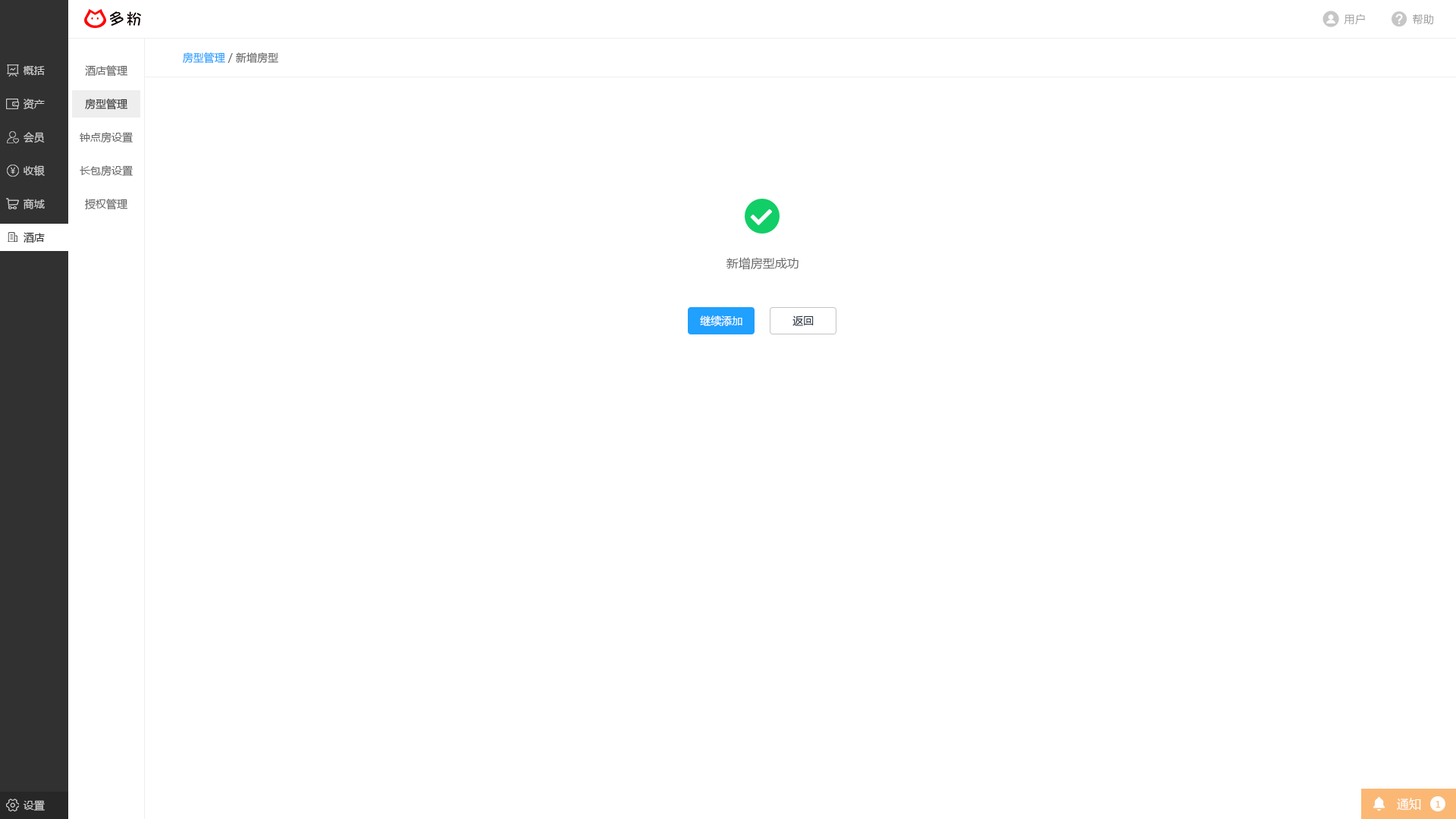
<style>
.page{position:relative;width:1456px;height:819px;background:#ffffff}
.page>*{position:absolute;margin:0}
.t1{font:10.6px "MicrosoftYaHei";letter-spacing:0.025em;color:#999999}
.t2{font:10.6px "MicrosoftYaHei";color:#666666}
.t3{font:10.6px "MicrosoftYaHei";color:#20a0ff}
.t4{font:10.6px "MicrosoftYaHei";color:#cccccc}
.t5{font:10.6px "MicrosoftYaHei";color:#333333}
.t6{font:10.6px "MicrosoftYaHei";color:#313131}
.t7{font:12.1px "MicrosoftYaHei";color:#666666}
.t8{font:10.6px "MicrosoftYaHei";color:#ffffff}
.t9{font:10.6px "MicrosoftYaHei";color:#1f2d3d}
.t10{font:12.1px "MicrosoftYaHei";color:#ffffff}
.t11{font:9.1px "MicrosoftYaHei";color:#fbb875}
</style>
<div class="page">
<p class="t1" style="left:1344px;top:14px;width:21px;height:11px">用户</p>
<p class="t1" style="left:1413px;top:14px;width:20px;height:11px">帮助</p>
<p class="t2" style="left:183px;top:52px;width:95px;height:12px"><span class="t3">房型管理</span> / 新增房型</p>
<p class="t4" style="left:23px;top:66px;width:22px;height:9px">概括</p>
<p class="t2" style="left:85px;top:65px;width:42px;height:12px">酒店管理</p>
<p class="t4" style="left:24px;top:99px;width:21px;height:10px">资产</p>
<p class="t5" style="left:85px;top:99px;width:42px;height:11px">房型管理</p>
<p class="t4" style="left:24px;top:132px;width:21px;height:11px">会员</p>
<p class="t2" style="left:80px;top:132px;width:53px;height:11px">钟点房设置</p>
<p class="t4" style="left:24px;top:165px;width:21px;height:11px">收银</p>
<p class="t2" style="left:80px;top:165px;width:53px;height:12px">长包房设置</p>
<p class="t4" style="left:23px;top:199px;width:22px;height:10px">商城</p>
<p class="t2" style="left:85px;top:199px;width:42px;height:11px">授权管理</p>
<p class="t6" style="left:24px;top:232px;width:21px;height:11px">酒店</p>
<p class="t7" style="left:726px;top:257px;width:73px;height:13px">新增房型成功</p>
<p class="t8" style="left:700px;top:315px;width:42px;height:12px">继续添加</p>
<p class="t9" style="left:792px;top:315px;width:22px;height:11px">返回</p>
<p class="t10" style="left:1397px;top:798px;width:24px;height:12px">通知</p>
<p class="t4" style="left:23px;top:800px;width:22px;height:11px">设置</p>
<p class="t11" style="left:1436px;top:801px;width:5px;height:7px">1</p>
</div>
